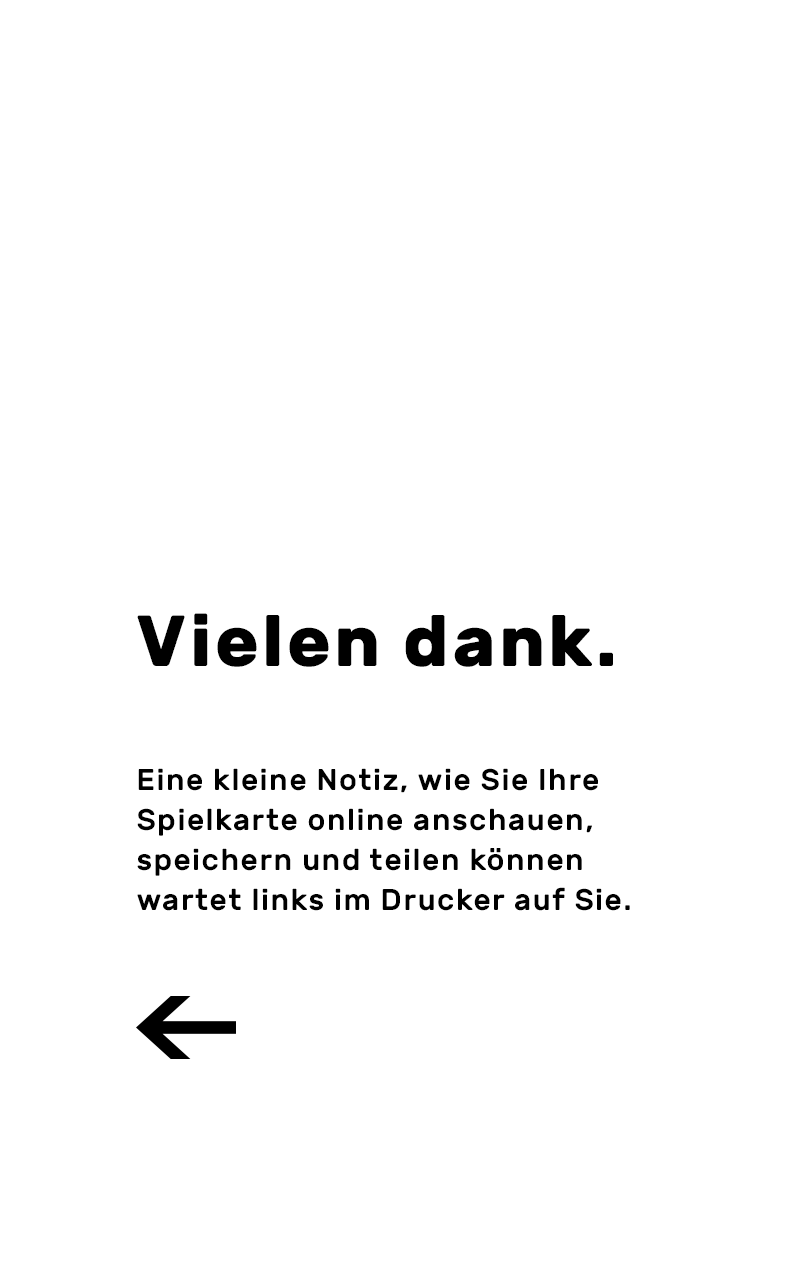
<style>
.page{position:relative;width:800px;height:1280px;background:#ffffff}
.page>*{position:absolute;margin:0}
.t1{font:72px "Rubik-Bold";letter-spacing:0.05em;color:#000000}
.t2{font:30px/40px "Rubik-Medium";letter-spacing:0.05em;color:#000000}
</style>
<div class="page">
<p class="t1" style="left:137px;top:613px;width:476px;height:54px">Vielen dank.</p>
<p class="t2" style="left:137px;top:768px;width:493px;height:143px;text-align:justify">Eine kleine Notiz, wie Sie Ihre<br>Spielkarte online anschauen, <br>speichern und teilen können<br>wartet links im Drucker auf Sie.</p>
</div>
